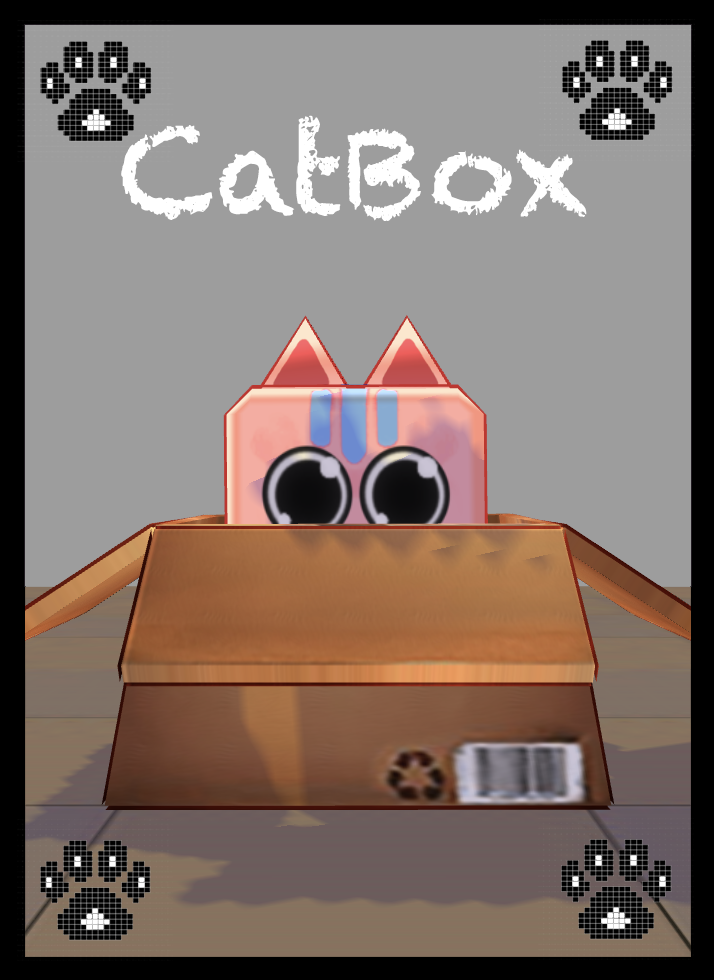
<style>
.page{position:relative;width:714px;height:980px;background:#9d9d9d}
.page>*{position:absolute;margin:0}
.t1{font:120px "Chalkduster";color:#ffffff}
</style>
<div class="page">
<p class="t1" style="left:121px;top:115px;width:466px;height:106px">CatBox</p>
</div>
